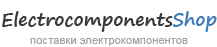
<style>
.page{position:relative;width:217px;height:47px;background:#ffffff}
.page>*{position:absolute;margin:0}
.t1{font:18px "SegoePrint-Bold";color:#393939}
.t2{font:18px "SegoePrint-Bold";color:#3e7cb4}
.t3{font:11px "ArialMT";color:#a4a4a4}
</style>
<div class="page">
<p class="t1" style="left:2px;top:11px;width:215px;height:21px">Electrocomponents<span class="t2">Shop</span></p>
<p class="t3" style="left:30px;top:38px;width:158px;height:8px">поставки электрокомпонентов</p>
</div>
